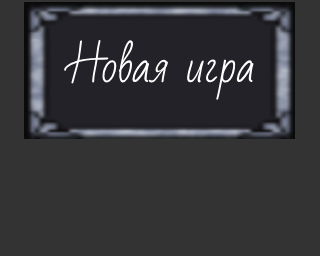
<style>
.page{position:relative;width:320px;height:256px;background:#333333}
.page>*{position:absolute;margin:0}
.t1{font:43px "BadScript-Regular";color:#ffffff}
</style>
<div class="page">
<p class="t1" style="left:64px;top:39px;width:190px;height:61px">Новая игра</p>
</div>
